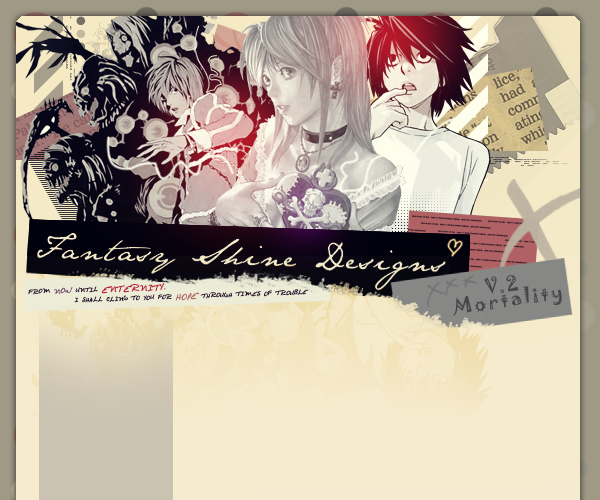
<style>
.page{position:relative;width:600px;height:500px}
.page>*{position:absolute;margin:0}
.t1{font:24px/14px "JokermanLetPlain";letter-spacing:0.1em;color:#47474b}
.t2{font:8px/10px "Avantque...";letter-spacing:0.1em;color:#1c071b;text-transform:uppercase}
.t3{font:10px/10px "Avantque...";letter-spacing:0.1em;color:#6b3d64;text-transform:uppercase}
.t4{font:12px/10px "Avantque...";letter-spacing:0.1em;color:#b71729;text-transform:uppercase}
.t5{font:12px/10px "Avantque...";letter-spacing:0.1em;color:#af6164;text-transform:uppercase}
</style>
<div class="page">
<p class="t1" style="left:453px;top:275px;width:109px;height:41px;text-align:center;rotate:-9deg">V.2 <br>Mortality</p>
<p class="t2" style="left:28px;top:283px;width:281px;height:20px;rotate:-2deg">from <span class="t3">now</span> until <span class="t4">enternity</span>,<br>            I shall cling to you for <span class="t5">hope</span> through times of trouble</p>
</div>
